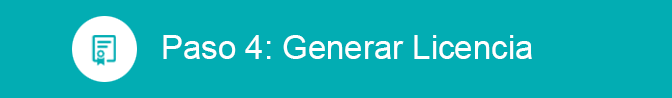
<style>
.page{position:relative;width:672px;height:98px;background:#02adb3}
.page>*{position:absolute;margin:0}
.t1{font:33px "ArialMT";color:#ffffff}
</style>
<div class="page">
<p class="t1" style="left:163px;top:35px;width:369px;height:24px">Paso 4: Generar Licencia</p>
</div>
